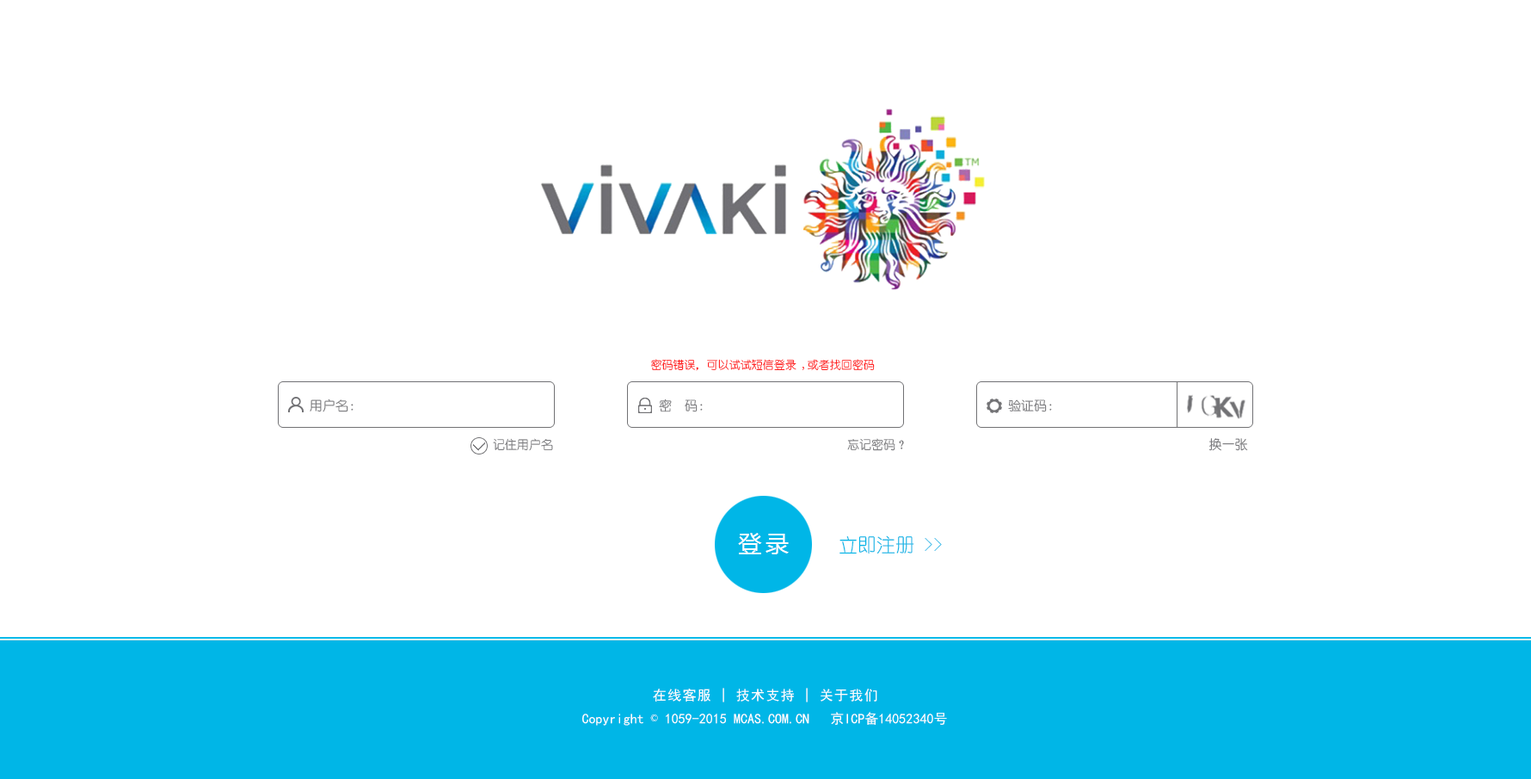
<style>
.page{position:relative;width:1531px;height:779px;background:#ffffff}
.page>*{position:absolute;margin:0}
.t1{font:11.2px "YouYuan";color:#ff0000}
.t2{font:12.9px "YouYuan";color:#717174}
.t3{font:12px "YouYuan"}
.t4{font:23.2px "MicrosoftYaHei";letter-spacing:0.16em;color:#ffffff}
.t5{font:18.9px "YouYuan";color:#00b6e7}
.t6{font:13.8px "SimHei";letter-spacing:0.078em;color:#ffffff}
.t7{font:13.8px "SimHei";color:#ffffff}
.t8{font:13.8px "SimSun";color:#ffffff}
</style>
<div class="page">
<p class="t1" style="left:651px;top:359px;width:224px;height:12px">密码错误，可以试试短信登录 ,或者找回密码</p>
<p class="t2" style="left:310px;top:398px;width:44px;height:14px">用户名：</p>
<p class="t2" style="left:659px;top:398px;width:44px;height:14px">密  码：</p>
<p class="t2" style="left:1008px;top:399px;width:44px;height:13px">验证码：</p>
<p class="t3" style="left:493px;top:438px;width:60px;height:13px">记住用户名</p>
<p class="t3" style="left:847px;top:438px;width:57px;height:13px">忘记密码？</p>
<p class="t2" style="left:1209px;top:438px;width:39px;height:13px">换一张</p>
<p class="t4" style="left:738px;top:533px;width:51px;height:21px">登录</p>
<p class="t5" style="left:840px;top:535px;width:102px;height:19px">立即注册 &gt;&gt;</p>
<p class="t6" style="left:653px;top:687px;width:225px;height:15px">在线客服 | 技术支持 | 关于我们</p>
<p class="t7" style="left:582px;top:712px;width:365px;height:13px">Copyright <span class="t8">©</span> 1059-2015 MCAS.COM.CN   京ICP备14052340号</p>
</div>
